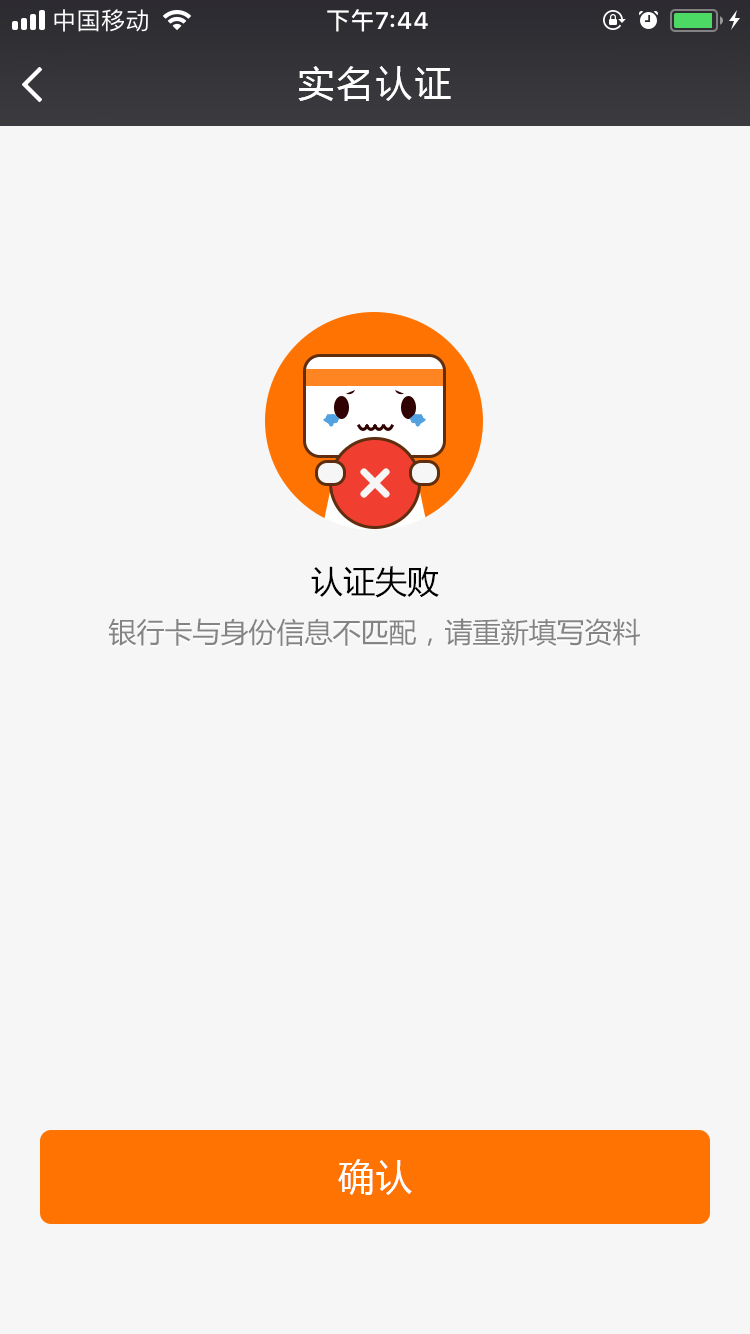
<style>
.page{position:relative;width:750px;height:1334px;background:#f6f6f6}
.page>*{position:absolute;margin:0}
.t1{font:36px "MicrosoftYaHei";letter-spacing:0.08em;color:#ffffff}
.t2{font:32px "MicrosoftYaHei";color:#000000}
.t3{font:28px "MicrosoftYaHei";color:#747474}
</style>
<div class="page">
<p class="t1" style="left:298px;top:66px;width:153px;height:35px">实名认证</p>
<p class="t2" style="left:311px;top:566px;width:128px;height:32px">认证失败</p>
<p class="t3" style="left:108px;top:618px;width:532px;height:28px">银行卡与身份信息不匹配，请重新填写资料</p>
<p class="t1" style="left:338px;top:1159px;width:74px;height:36px">确认</p>
</div>
